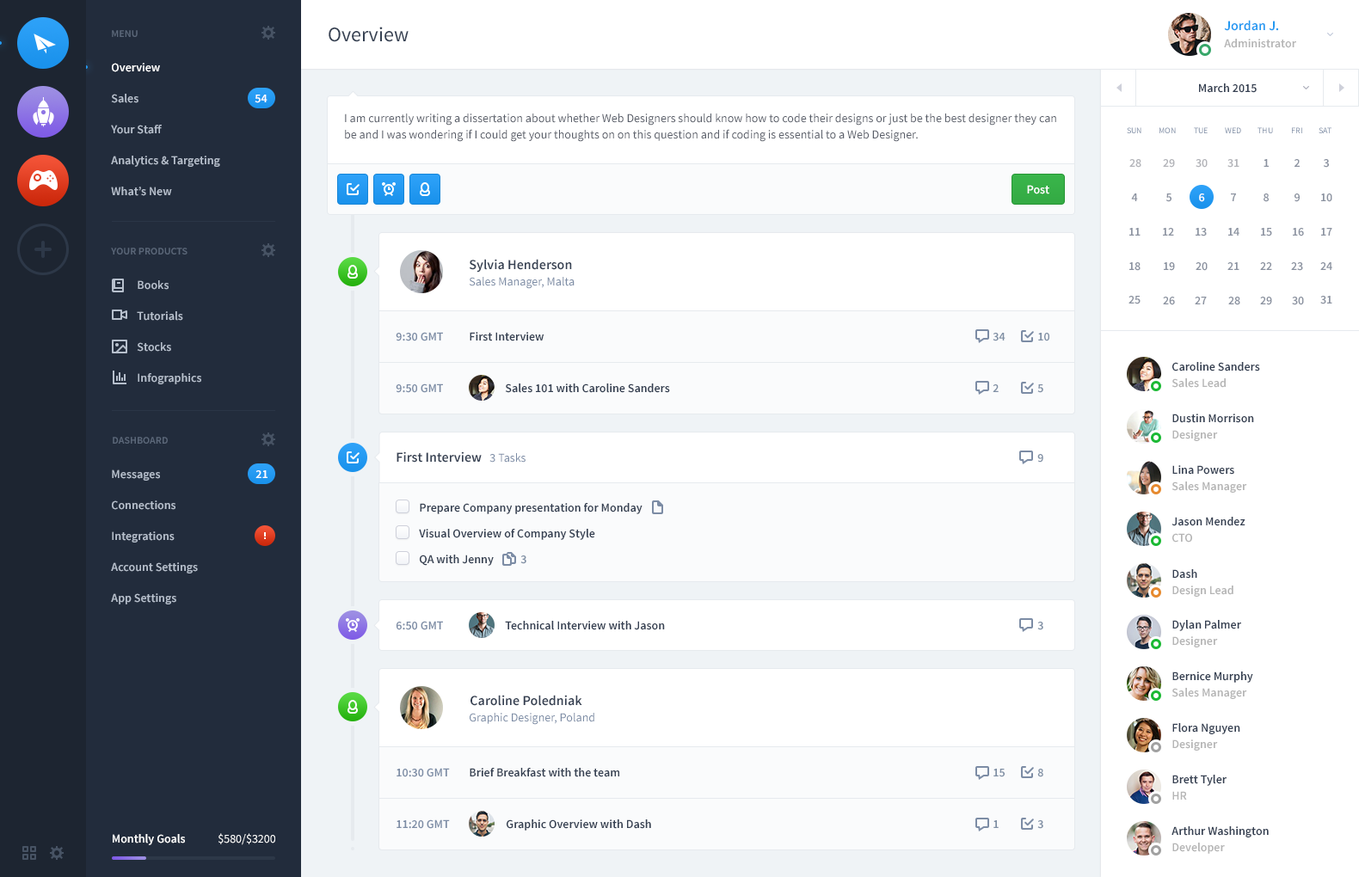
<style>
.page{position:relative;width:1359px;height:877px;background:#ffffff}
.page>*{position:absolute;margin:0}
.t1{font:20.6px "SourceSansPro-Regular";color:#354052}
.t2{font:13.8px "SourceSansPro-Semibold";color:#2399f1}
.t3{font:10.3px "SourceSansPro-Semibold";color:#5b6779;text-transform:uppercase}
.t4{font:12px "SourceSansPro-Semibold";color:#b5b5b5}
.t5{font:12px/31px "SourceSansPro-Semibold";color:#b7c0cd}
.t6{font:12px/31px "SourceSansPro-Semibold";color:#ffffff}
.t7{font:12px "SourceSansPro-Semibold";color:#354052}
.t8{font:12px "SourceSansPro-Semibold";color:#ffffff}
.t9{font:12px/16.3px "SourceSansPro-Regular";color:#585d68}
.t10{font:8.6px "SourceSansPro-Regular";color:#7c8ca5;text-transform:uppercase}
.t11{font:8.6px "SourceSansPro-Regular";text-transform:uppercase}
.t12{font:12px "SourceSansPro-Semibold";color:#b3b4b9;text-transform:uppercase}
.t13{font:12px "SourceSansPro-Semibold";color:#8b92a0;text-transform:uppercase}
.t14{font:12px "SourceSansPro-Semibold";color:#ffffff;text-transform:uppercase}
.t15{font:13.8px "SourceSansPro-Semibold";color:#354052}
.t16{font:12px "SourceSansPro-Regular";color:#7c8ca5}
.t17{font:12px "SourceSansPro-Semibold";color:#7c8ca5}
.t18{font:12px "SourceSansPro-Semibold";color:#7f8fa4}
.t19{font:12px "SourceSansPro-Regular";color:#ffffff}
</style>
<div class="page">
<p class="t1" style="left:329px;top:27px;width:80px;height:15px">Overview</p>
<p class="t2" style="left:1224px;top:20px;width:55px;height:11px">Jordan J.</p>
<p class="t3" style="left:112px;top:30px;width:26px;height:7px">Menu</p>
<p class="t4" style="left:1224px;top:39px;width:72px;height:9px">Administrator</p>
<p class="t5" style="left:111px;top:63px;width:109px;height:133px"><span class="t6">Overview<br></span>Sales<br>Your Staff<br>Analytics &amp; Targeting<br>What’s New</p>
<p class="t7" style="left:1199px;top:83px;width:58px;height:10px">March 2015</p>
<p class="t8" style="left:255px;top:95px;width:13px;height:8px">54</p>
<p class="t9" style="left:345px;top:114px;width:711px;height:28px">I am currently writing a dissertation about whether Web Designers should know how to code their designs or just be the best designer they can be and I was wondering if I could get your thoughts on on this question and if coding is essential to a Web Designer.</p>
<p class="t10" style="left:1127px;top:127px;width:14px;height:6px">SUN</p>
<p class="t11" style="left:1160px;top:127px;width:16px;height:6px">MON</p>
<p class="t10" style="left:1194px;top:127px;width:14px;height:6px">TUE</p>
<p class="t10" style="left:1225px;top:127px;width:16px;height:6px">WED</p>
<p class="t10" style="left:1258px;top:127px;width:15px;height:6px">THU</p>
<p class="t10" style="left:1292px;top:127px;width:10px;height:6px">FRI</p>
<p class="t10" style="left:1319px;top:127px;width:13px;height:6px">SAT</p>
<p class="t12" style="left:1129px;top:159px;width:12px;height:9px">28</p>
<p class="t12" style="left:1163px;top:159px;width:12px;height:9px">29</p>
<p class="t12" style="left:1196px;top:159px;width:12px;height:9px">30</p>
<p class="t12" style="left:1227px;top:159px;width:13px;height:9px">31</p>
<p class="t13" style="left:1264px;top:159px;width:5px;height:8px">1</p>
<p class="t13" style="left:1295px;top:159px;width:5px;height:8px">2</p>
<p class="t13" style="left:1323px;top:159px;width:6px;height:9px">3</p>
<p class="t8" style="left:1027px;top:185px;width:22px;height:9px">Post</p>
<p class="t13" style="left:1131px;top:194px;width:7px;height:7px">4</p>
<p class="t13" style="left:1166px;top:194px;width:6px;height:8px">5</p>
<p class="t14" style="left:1199px;top:194px;width:6px;height:8px">6</p>
<p class="t13" style="left:1231px;top:194px;width:5px;height:7px">7</p>
<p class="t13" style="left:1264px;top:194px;width:5px;height:8px">8</p>
<p class="t13" style="left:1295px;top:194px;width:5px;height:8px">9</p>
<p class="t13" style="left:1321px;top:194px;width:11px;height:8px">10</p>
<p class="t13" style="left:1129px;top:228px;width:12px;height:8px">11</p>
<p class="t13" style="left:1163px;top:228px;width:11px;height:8px">12</p>
<p class="t13" style="left:1196px;top:228px;width:11px;height:9px">13</p>
<p class="t13" style="left:1228px;top:228px;width:12px;height:8px">14</p>
<p class="t13" style="left:1261px;top:228px;width:11px;height:9px">15</p>
<p class="t13" style="left:1293px;top:228px;width:11px;height:9px">16</p>
<p class="t13" style="left:1321px;top:228px;width:11px;height:8px">17</p>
<p class="t3" style="left:111px;top:248px;width:77px;height:7px">Your Products</p>
<p class="t15" style="left:469px;top:259px;width:103px;height:14px">Sylvia Henderson</p>
<p class="t13" style="left:1129px;top:262px;width:12px;height:9px">18</p>
<p class="t13" style="left:1164px;top:262px;width:11px;height:9px">19</p>
<p class="t13" style="left:1196px;top:262px;width:12px;height:9px">20</p>
<p class="t13" style="left:1227px;top:262px;width:13px;height:8px">21</p>
<p class="t13" style="left:1260px;top:262px;width:12px;height:8px">22</p>
<p class="t13" style="left:1291px;top:262px;width:12px;height:9px">23</p>
<p class="t13" style="left:1320px;top:262px;width:12px;height:8px">24</p>
<p class="t5" style="left:137px;top:280px;width:64px;height:104px">Books<br>Tutorials<br>Stocks<br>Infographics</p>
<p class="t16" style="left:469px;top:277px;width:106px;height:12px">Sales Manager, Malta</p>
<p class="t13" style="left:1129px;top:296px;width:12px;height:9px">25</p>
<p class="t13" style="left:1163px;top:297px;width:12px;height:8px">26</p>
<p class="t13" style="left:1195px;top:297px;width:12px;height:8px">27</p>
<p class="t13" style="left:1228px;top:297px;width:12px;height:8px">28</p>
<p class="t13" style="left:1260px;top:297px;width:12px;height:8px">29</p>
<p class="t13" style="left:1292px;top:297px;width:12px;height:8px">30</p>
<p class="t13" style="left:1320px;top:296px;width:12px;height:9px">31</p>
<p class="t17" style="left:396px;top:332px;width:47px;height:9px">9:30 GMT</p>
<p class="t7" style="left:470px;top:332px;width:74px;height:9px">First Interview</p>
<p class="t18" style="left:993px;top:333px;width:13px;height:8px">34</p>
<p class="t18" style="left:1038px;top:333px;width:11px;height:8px">10</p>
<p class="t7" style="left:1172px;top:362px;width:88px;height:10px">Caroline Sanders</p>
<p class="t17" style="left:396px;top:384px;width:47px;height:9px">9:50 GMT</p>
<p class="t7" style="left:505px;top:384px;width:165px;height:9px">Sales 101 with Caroline Sanders</p>
<p class="t18" style="left:993px;top:384px;width:6px;height:8px">2</p>
<p class="t18" style="left:1037px;top:384px;width:6px;height:9px">5</p>
<p class="t4" style="left:1172px;top:378px;width:54px;height:10px">Sales Lead</p>
<p class="t7" style="left:1172px;top:414px;width:82px;height:9px">Dustin Morrison</p>
<p class="t3" style="left:113px;top:437px;width:55px;height:7px">Dashboard</p>
<p class="t4" style="left:1172px;top:430px;width:46px;height:11px">Designer</p>
<p class="t15" style="left:397px;top:452px;width:85px;height:11px">First Interview</p>
<p class="t16" style="left:489px;top:453px;width:37px;height:10px">3 Tasks</p>
<p class="t18" style="left:1037px;top:454px;width:6px;height:9px">9</p>
<p class="t5" style="left:111px;top:470px;width:87px;height:135px">Messages<br>Connections<br>Integrations<br>Account Settings<br>App Settings</p>
<p class="t8" style="left:255px;top:471px;width:13px;height:7px">21</p>
<p class="t7" style="left:1172px;top:465px;width:62px;height:10px">Lina Powers</p>
<p class="t4" style="left:1172px;top:482px;width:75px;height:11px">Sales Manager</p>
<p class="t7" style="left:420px;top:503px;width:223px;height:11px">Prepare Company presentation for Monday</p>
<p class="t7" style="left:1172px;top:517px;width:74px;height:9px">Jason Mendez</p>
<p class="t7" style="left:419px;top:529px;width:176px;height:11px">Visual Overview of Company Style</p>
<p class="t4" style="left:1172px;top:533px;width:20px;height:10px">CTO</p>
<p class="t7" style="left:420px;top:555px;width:74px;height:11px">QA with Jenny</p>
<p class="t18" style="left:520px;top:556px;width:6px;height:8px">3</p>
<p class="t7" style="left:1172px;top:569px;width:25px;height:10px">Dash</p>
<p class="t4" style="left:1172px;top:586px;width:61px;height:11px">Design Lead</p>
<p class="t17" style="left:396px;top:621px;width:47px;height:10px">6:50 GMT</p>
<p class="t7" style="left:505px;top:621px;width:160px;height:10px">Technical Interview with Jason</p>
<p class="t18" style="left:1037px;top:622px;width:6px;height:9px">3</p>
<p class="t7" style="left:1172px;top:620px;width:69px;height:11px">Dylan Palmer</p>
<p class="t4" style="left:1172px;top:637px;width:46px;height:11px">Designer</p>
<p class="t7" style="left:1172px;top:672px;width:81px;height:11px">Bernice Murphy</p>
<p class="t4" style="left:1172px;top:688px;width:75px;height:11px">Sales Manager</p>
<p class="t15" style="left:471px;top:695px;width:111px;height:11px">Caroline Poledniak</p>
<p class="t16" style="left:470px;top:713px;width:124px;height:12px">Graphic Designer, Poland</p>
<p class="t7" style="left:1172px;top:723px;width:68px;height:12px">Flora Nguyen</p>
<p class="t4" style="left:1172px;top:740px;width:46px;height:11px">Designer</p>
<p class="t17" style="left:397px;top:768px;width:53px;height:10px">10:30 GMT</p>
<p class="t7" style="left:470px;top:768px;width:149px;height:10px">Brief Breakfast with the team</p>
<p class="t18" style="left:994px;top:769px;width:11px;height:9px">15</p>
<p class="t18" style="left:1037px;top:769px;width:6px;height:9px">8</p>
<p class="t7" style="left:1172px;top:775px;width:55px;height:11px">Brett Tyler</p>
<p class="t4" style="left:1172px;top:791px;width:15px;height:9px">HR</p>
<p class="t17" style="left:397px;top:820px;width:53px;height:9px">11:20 GMT</p>
<p class="t7" style="left:507px;top:820px;width:144px;height:11px">Graphic Overview with Dash</p>
<p class="t18" style="left:994px;top:821px;width:5px;height:7px">1</p>
<p class="t18" style="left:1037px;top:821px;width:6px;height:8px">3</p>
<p class="t19" style="left:218px;top:834px;width:57px;height:12px">$580/$3200</p>
<p class="t7" style="left:1172px;top:827px;width:97px;height:11px">Arthur Washington</p>
<p class="t8" style="left:113px;top:834px;width:72px;height:12px">Monthly Goals</p>
<p class="t4" style="left:1172px;top:843px;width:53px;height:11px">Developer</p>
</div>
